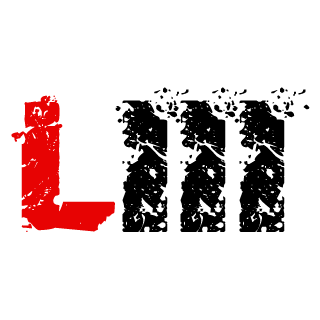
<style>
.page{position:relative;width:320px;height:320px;background:#ffffff}
.page>*{position:absolute;margin:0}
.t1{font:150px "SoulMission";color:#000000}
.t2{font:150px "SoulMission";color:#e80404}
</style>
<div class="page">
<p class="t1" style="left:11px;top:87px;width:299px;height:145px"><span class="t2">L</span>III</p>
</div>
